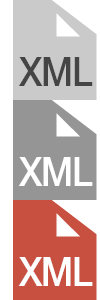
<style>
.page{position:relative;width:100px;height:300px;background:#ffffff}
.page>*{position:absolute;margin:0}
.t1{font:40.9px "HelveticaNeue-Medium";letter-spacing:-0.04em;color:#454545;scale:0.89 1}
.t2{font:40.9px "HelveticaNeue-Medium";letter-spacing:-0.04em;color:#ffffff;scale:0.89 1}
</style>
<div class="page">
<p class="t1" style="left:18px;top:57px;width:75px;height:29px">XML</p>
<p class="t2" style="left:18px;top:157px;width:75px;height:29px">XML</p>
<p class="t2" style="left:18px;top:257px;width:75px;height:29px">XML</p>
</div>
